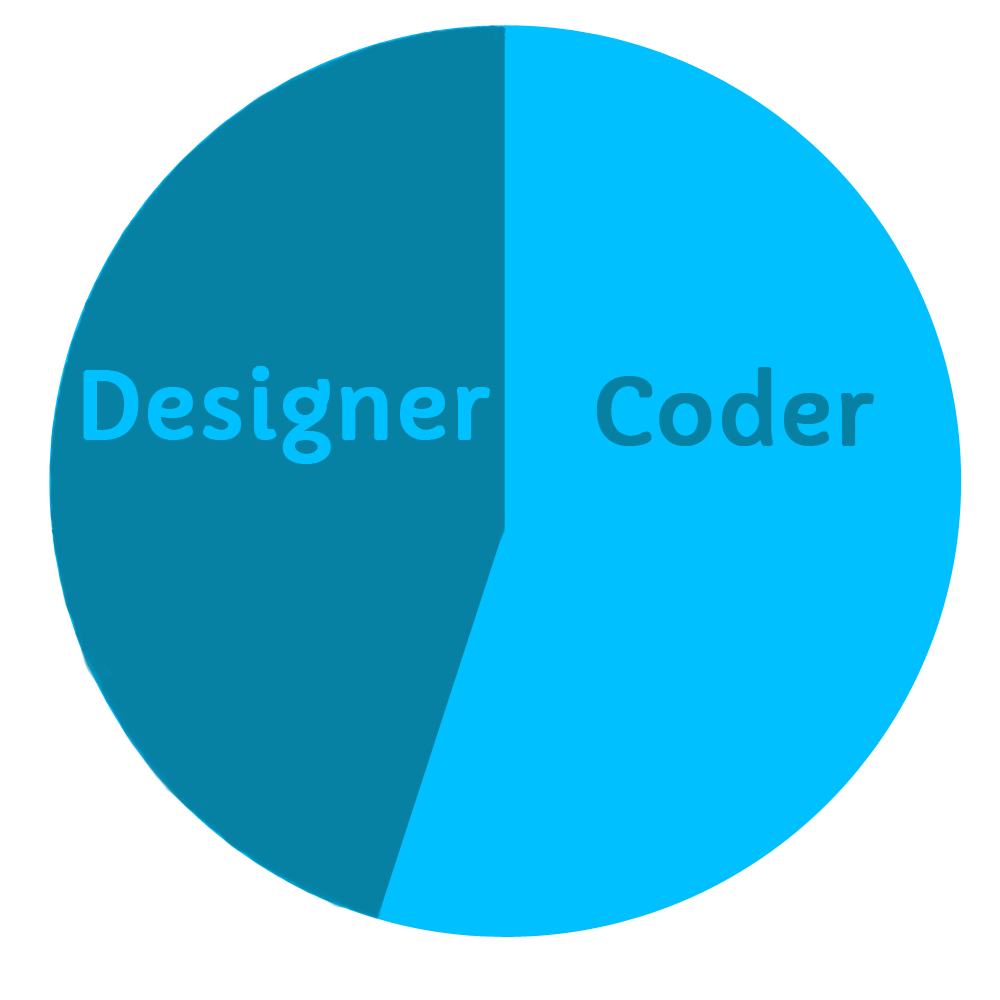
<style>
.page{position:relative;width:1000px;height:1000px;background:#00c0ff}
.page>*{position:absolute;margin:0}
.t1{font:90px "Capriola-Regular";color:#00c0ff;font-weight:bold}
.t2{font:90px "Capriola-Regular";color:#0681a4;font-weight:bold}
</style>
<div class="page">
<p class="t1" style="left:83px;top:366px;width:407px;height:98px">Designer</p>
<p class="t2" style="left:596px;top:367px;width:278px;height:79px">Coder</p>
</div>
